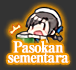
<style>
.page{position:relative;width:76px;height:70px;background:#333333}
.page>*{position:absolute;margin:0}
.t1{font:15px/10px "RyuminPro-ExBold";letter-spacing:-0.08em;color:#ffffff;font-weight:bold;scale:0.9 1}
</style>
<div class="page">
<p class="t1" style="left:7px;top:41px;width:62px;height:22px;text-align:center">Pasokan<br>sementara</p>
</div>
